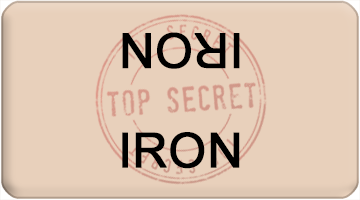
<style>
.page{position:relative;width:360px;height:200px;background:#e8d0bb}
.page>*{position:absolute;margin:0}
.t1{font:48px "ArialMT";color:#000000;font-weight:bold}
</style>
<div class="page">
<p class="t1" style="left:122px;top:32px;width:118px;height:37px;rotate:180deg">IRON</p>
<p class="t1" style="left:122px;top:132px;width:118px;height:37px">IRON</p>
</div>
